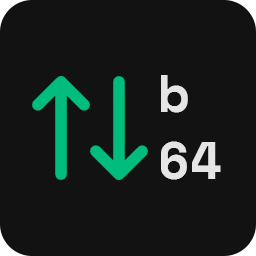
<style>
.page{position:relative;width:256px;height:256px;background:#121212}
.page>*{position:absolute;margin:0}
.t1{font:52px/67px "SpaceMono-Bold";color:#e5e5e5}
</style>
<div class="page">
<p class="t1" style="left:161px;top:75px;width:60px;height:105px">b<br>64</p>
</div>
